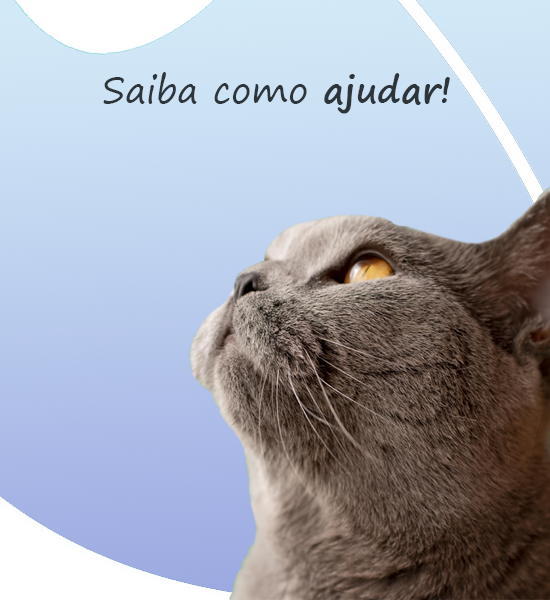
<style>
.page{position:relative;width:550px;height:600px}
.page>*{position:absolute;margin:0}
.t1{font:36px "SegoePrint";color:#2d353a}
.t2{font:36px "SegoePrint-Bold";color:#2d353a}
</style>
<div class="page">
<p class="t1" style="left:103px;top:72px;width:347px;height:42px">Saiba como <span class="t2">ajudar!</span></p>
</div>
